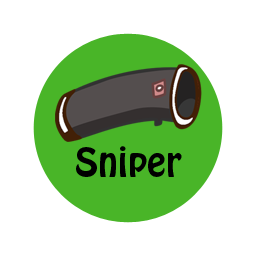
<style>
.page{position:relative;width:256px;height:256px;background:#ffffff}
.page>*{position:absolute;margin:0}
.t1{font:36px "HoboStd";color:#000000}
</style>
<div class="page">
<p class="t1" style="left:76px;top:146px;width:106px;height:31px">Sniper</p>
</div>
